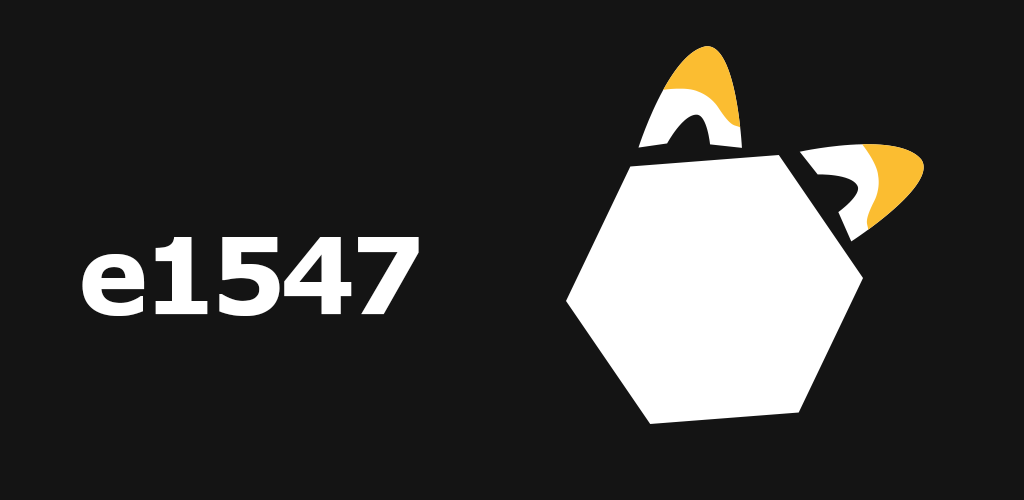
<style>
.page{position:relative;width:1024px;height:500px;background:#141414}
.page>*{position:absolute;margin:0}
.t1{font:106.3px "Verdana-Bold";letter-spacing:-0.06em;color:#ffffff}
</style>
<div class="page">
<p class="t1" style="left:82px;top:237px;width:337px;height:79px">e1547</p>
</div>
